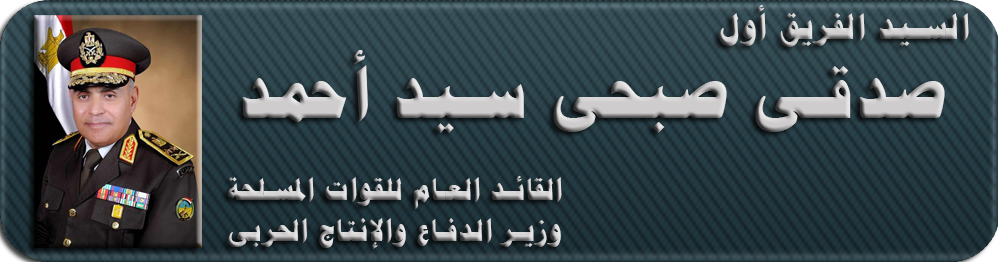
<style>
.page{position:relative;width:998px;height:262px}
.page>*{position:absolute;margin:0}
.t1{font:30px/41px "PTBoldHeading";letter-spacing:0.06em;color:#cecccc}
.t2{font:35px/79px "PTBoldHeading";letter-spacing:0.06em;color:#cecccc}
.t3{font:70px/79px "PTBoldHeading";letter-spacing:0.06em;color:#cecccc}
</style>
<div class="page">
<p class="t1" style="left:228px;top:5px;width:741px;height:244px;text-align:right"><span class="t2">السيد الفريق أول<br></span><span class="t3">صدقى صبحى سيد أحمد<br></span><br> القائد العام للقوات المسلحة<br> وزير الدفاع والإنتاج الحربى</p>
</div>
